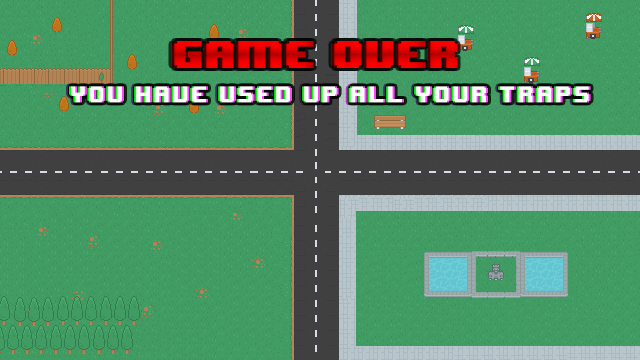
<style>
.page{position:relative;width:640px;height:360px;background:#409c62}
.page>*{position:absolute;margin:0}
.t1{font:18.7px "8BITWONDERNominal";color:#ffffff}
</style>
<div class="page">
<p class="t1" style="left:69px;top:86px;width:520px;height:17px">You have used up all your traps</p>
<p class="t1" style="left:71px;top:86px;width:520px;height:17px">You have used up all your traps</p>
<p class="t1" style="left:71px;top:86px;width:520px;height:17px">You have used up all your traps</p>
</div>
